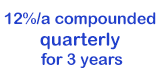
<style>
.page{position:relative;width:160px;height:75px;background:#ffffff}
.page>*{position:absolute;margin:0}
.t1{font:16px "ArialRoundedMTBold";color:#2041cd}
.t2{font:18px "ArialRoundedMTBold";color:#2041cd}
</style>
<div class="page">
<p class="t1" style="left:4px;top:12px;width:152px;height:56px;text-align:center">12%/a compounded<br><span class="t2">quarterly<br></span> for 3 years</p>
</div>
